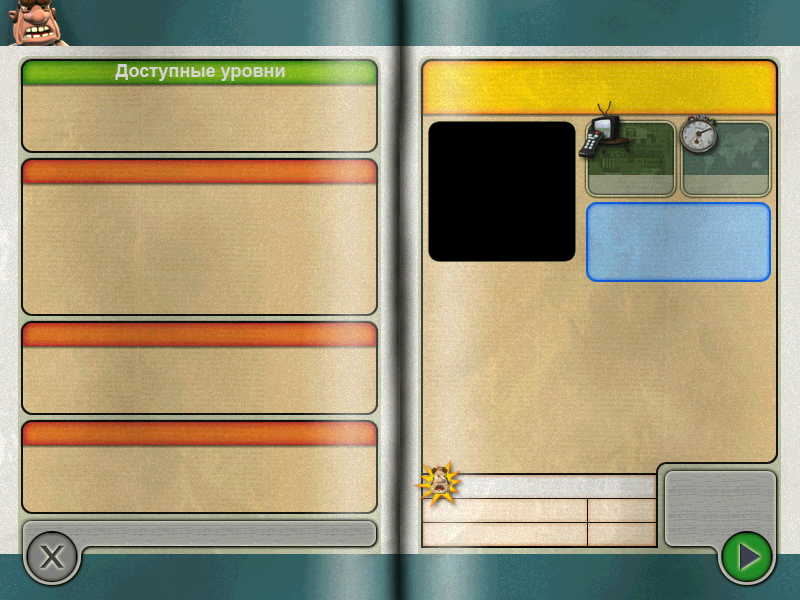
<style>
.page{position:relative;width:800px;height:600px}
.page>*{position:absolute;margin:0}
.t1{font:18px "Arial-BoldMT";color:#d3d3d3}
</style>
<div class="page">
<p class="t1" style="left:115px;top:64px;width:170px;height:17px">Доступные уровни</p>
</div>
